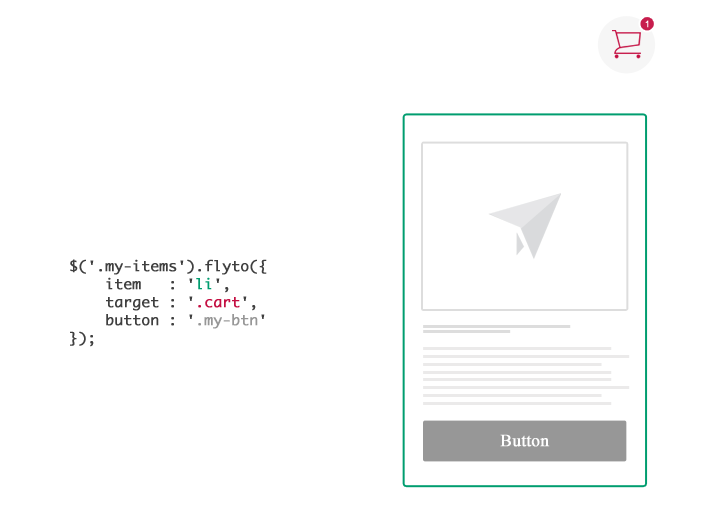
<style>
.page{position:relative;width:720px;height:525px;background:#ffffff}
.page>*{position:absolute;margin:0}
.t1{font:9px "ArialMT";color:#ffffff;font-weight:bold}
.t2{font:14px/18px "Monaco";color:#3f3f3f;font-weight:bold}
.t3{font:14px/18px "Monaco";color:#009d6f;font-weight:bold}
.t4{font:14px/18px "Monaco";color:#c40f42;font-weight:bold}
.t5{font:14px/18px "Monaco";color:#979797;font-weight:bold}
.t6{font:17px "TimesNewRomanPSMT";color:#ffffff;font-weight:bold}
</style>
<div class="page">
<p class="t1" style="left:645px;top:20px;width:4px;height:8px">1</p>
<p class="t2" style="left:70px;top:259px;width:197px;height:88px">$('.my-items').flyto({<br> item   : '<span class="t3">li</span>',<br> target : '<span class="t4">.cart</span>',<br> button : '<span class="t5">.my-btn</span>'<br>});</p>
<p class="t6" style="left:500px;top:434px;width:50px;height:13px">Button</p>
</div>
